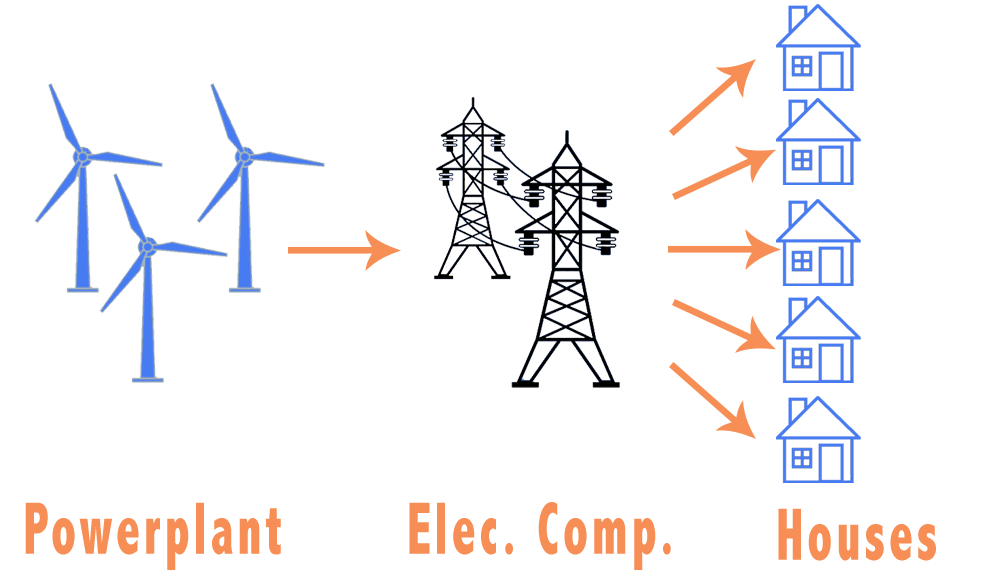
<style>
.page{position:relative;width:1000px;height:587px;background:#ffffff}
.page>*{position:absolute;margin:0}
.t1{font:75px "AbadiMT-CondensedExtraBold";letter-spacing:0.075em;color:#f68e56;scale:0.68 1}
</style>
<div class="page">
<p class="t1" style="left:25px;top:502px;width:256px;height:68px">Powerplant</p>
<p class="t1" style="left:409px;top:502px;width:262px;height:68px">Elec. Comp.</p>
<p class="t1" style="left:778px;top:508px;width:158px;height:53px">Houses</p>
</div>
